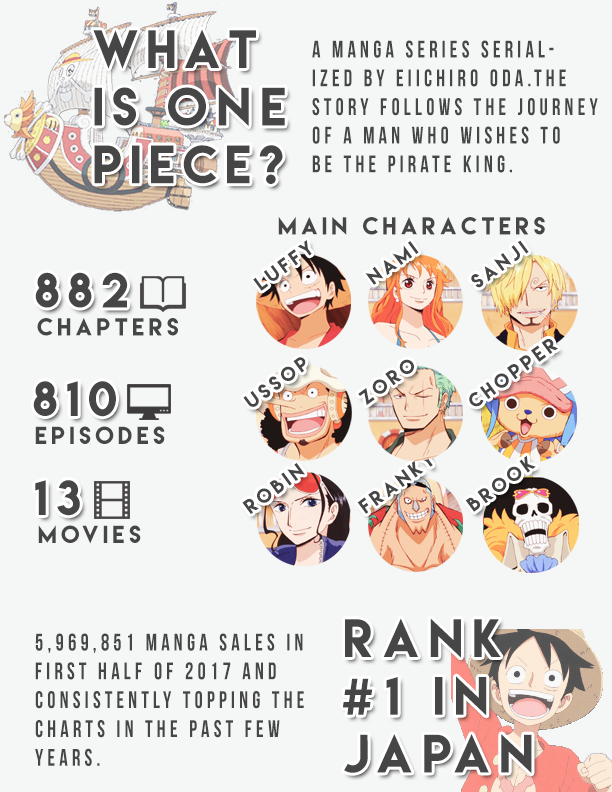
<style>
.page{position:relative;width:612px;height:792px;background:#f5f6f6}
.page>*{position:absolute;margin:0}
.t1{font:48px "LemonMilk";letter-spacing:0.16em;color:#464646}
.t2{font:48px "LemonMilk";letter-spacing:0.2em;color:#464646}
.t3{font:23.9px "BebasNeue";letter-spacing:0.2em;color:#464646;scale:0.87 1}
.t4{font:22px "LemonMilk";letter-spacing:0.2em;color:#464646}
.t5{font:17.9px "LemonMilk";letter-spacing:0.2em;color:#464646}
.t6{font:18px "LemonMilk";letter-spacing:0.2em;color:#464646}
.t7{font:44px "LemonMilk";letter-spacing:0.2em;color:#464646}
.t8{font:48.1px "LemonMilk";letter-spacing:0.2em;color:#464646}
.t9{font:24px "BebasNeue";letter-spacing:0.2em;color:#464646;scale:0.87 1}
</style>
<div class="page">
<p class="t1" style="left:93px;top:29px;width:192px;height:155px">What <br>is <span class="t2">One <br></span>Piece?</p>
<p class="t3" style="left:312px;top:40px;width:286px;height:133px">A manga series serial-<br>ized by Eiichiro Oda.the <br>story follows the journey<br>of a man who wishes to <br>be the pirate king.</p>
<p class="t4" style="left:278px;top:216px;width:267px;height:19px">main characters</p>
<p class="t5" style="left:253px;top:240px;width:59px;height:51px;rotate:-36deg">Luffy</p>
<p class="t6" style="left:365px;top:241px;width:54px;height:44px;rotate:-36deg">nami</p>
<p class="t6" style="left:471px;top:240px;width:58px;height:48px;rotate:-36deg">sanji</p>
<p class="t7" style="left:35px;top:272px;width:93px;height:36px">882</p>
<p class="t4" style="left:37px;top:317px;width:141px;height:19px">Chapters</p>
<p class="t6" style="left:469px;top:339px;width:89px;height:68px;rotate:-36deg">Chopper</p>
<p class="t6" style="left:243px;top:357px;width:63px;height:50px;rotate:-36deg">Ussop</p>
<p class="t6" style="left:358px;top:359px;width:56px;height:47px;rotate:-36deg">Zoro</p>
<p class="t7" style="left:33px;top:381px;width:83px;height:36px">810</p>
<p class="t4" style="left:35px;top:426px;width:130px;height:18px">Episodes</p>
<p class="t6" style="left:357px;top:451px;width:76px;height:63px;rotate:-36deg">Franky</p>
<p class="t6" style="left:465px;top:455px;width:71px;height:57px;rotate:-36deg">Brook</p>
<p class="t6" style="left:242px;top:463px;width:63px;height:51px;rotate:-36deg">Robin</p>
<p class="t7" style="left:35px;top:480px;width:45px;height:36px">13</p>
<p class="t4" style="left:38px;top:525px;width:103px;height:19px">movies</p>
<p class="t8" style="left:343px;top:618px;width:189px;height:156px">Rank <br>#1 In <br>Japan</p>
<p class="t9" style="left:35px;top:633px;width:269px;height:133px">5,969,851 manga sales in <br>first half of 2017 and <br>consistently topping the <br>charts in the past few <br>years.</p>
</div>
